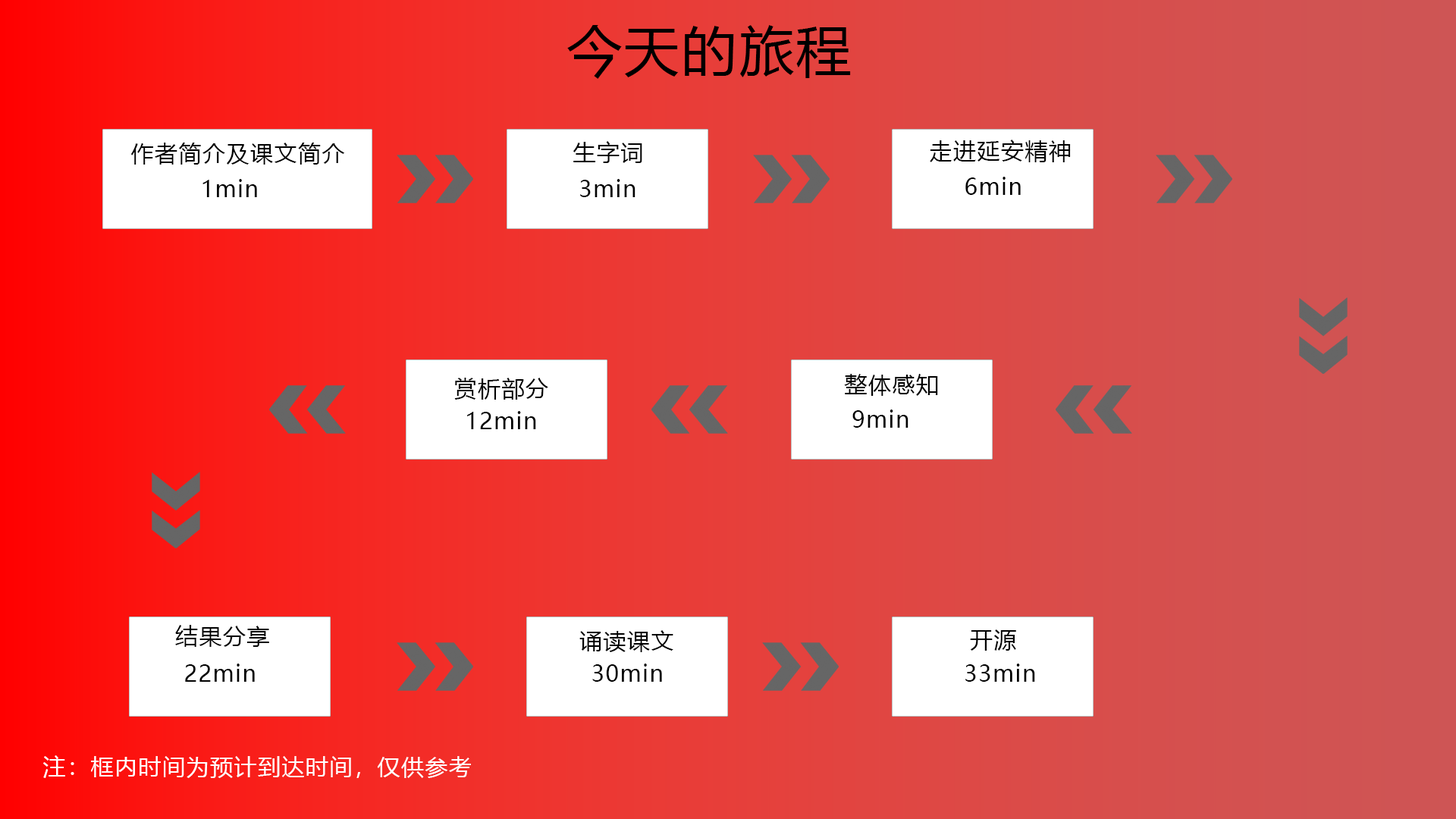
<style>
.page{position:relative;width:1456px;height:819px}
.page>*{position:absolute;margin:0}
.t1{font:54.6px "MicrosoftYaHei";letter-spacing:0.05em;color:#000000}
.t2{font:22.7px "MicrosoftYaHei";letter-spacing:0.05em;color:#000000}
.t3{font:22.7px "MicrosoftYaHei";letter-spacing:0.05em;color:#ffffff}
</style>
<div class="page">
<p class="t1" style="left:567px;top:25px;width:284px;height:54px">今天的旅程</p>
<p class="t2" style="left:131px;top:143px;width:213px;height:22px">作者简介及课文简介</p>
<p class="t2" style="left:573px;top:141px;width:69px;height:22px">生字词</p>
<p class="t2" style="left:930px;top:140px;width:141px;height:22px">走进延安精神</p>
<p class="t2" style="left:202px;top:179px;width:55px;height:18px">1min</p>
<p class="t2" style="left:580px;top:179px;width:55px;height:18px">3min</p>
<p class="t2" style="left:965px;top:177px;width:56px;height:18px">6min</p>
<p class="t2" style="left:454px;top:378px;width:94px;height:22px">赏析部分</p>
<p class="t2" style="left:844px;top:374px;width:94px;height:22px">整体感知</p>
<p class="t2" style="left:467px;top:411px;width:69px;height:18px">12min</p>
<p class="t2" style="left:852px;top:409px;width:56px;height:19px">9min</p>
<p class="t2" style="left:175px;top:625px;width:94px;height:22px">结果分享</p>
<p class="t2" style="left:970px;top:629px;width:46px;height:22px">开源</p>
<p class="t2" style="left:579px;top:630px;width:94px;height:22px">诵读课文</p>
<p class="t2" style="left:185px;top:664px;width:70px;height:18px">22min</p>
<p class="t2" style="left:592px;top:664px;width:70px;height:18px">30min</p>
<p class="t2" style="left:965px;top:664px;width:70px;height:18px">33min</p>
<p class="t3" style="left:43px;top:755px;width:428px;height:23px">注：框内时间为预计到达时间，仅供参考</p>
</div>
